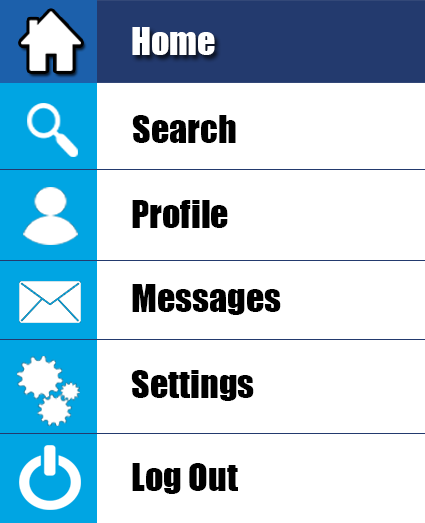
<style>
.page{position:relative;width:425px;height:523px;background:#ffffff}
.page>*{position:absolute;margin:0}
.t1{font:36px "Impact";color:#ffffff}
.t2{font:36px "Impact";color:#000000}
</style>
<div class="page">
<p class="t1" style="left:132px;top:27px;width:83px;height:28px">Home</p>
<p class="t2" style="left:132px;top:115px;width:104px;height:28px">Search</p>
<p class="t2" style="left:132px;top:200px;width:96px;height:28px">Profile</p>
<p class="t2" style="left:132px;top:284px;width:149px;height:31px">Messages</p>
<p class="t2" style="left:131px;top:370px;width:123px;height:31px">Settings</p>
<p class="t2" style="left:132px;top:463px;width:106px;height:31px">Log Out</p>
</div>
